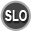
<style>
.page{position:relative;width:32px;height:32px;background:#ffffff}
.page>*{position:absolute;margin:0}
.t1{font:15.3px "Arial-BoldMT";color:#ffffff;scale:0.71 1}
</style>
<div class="page">
<p class="t1" style="left:5px;top:10px;width:22px;height:11px">SLO</p>
</div>
